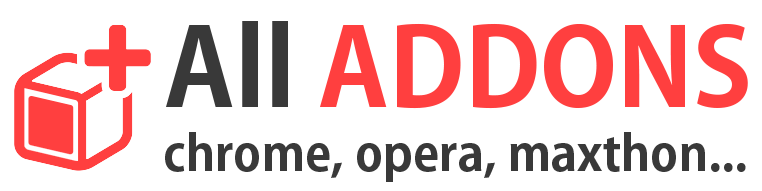
<style>
.page{position:relative;width:762px;height:191px;background:#ffffff}
.page>*{position:absolute;margin:0}
.t1{font:107px "AdobeGothicStd-Bold";color:#ff3f3f}
.t2{font:107px "AdobeGothicStd-Bold";color:#393939}
.t3{font:48px "AdobeGothicStd-Bold";color:#393939}
</style>
<div class="page">
<p class="t1" style="left:166px;top:21px;width:582px;height:88px"><span class="t2">All </span>ADDONS</p>
<p class="t3" style="left:165px;top:132px;width:581px;height:50px">chrome, opera, maxthon...</p>
</div>
